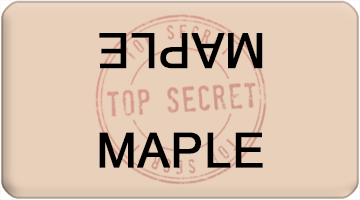
<style>
.page{position:relative;width:360px;height:200px;background:#e8d0bb}
.page>*{position:absolute;margin:0}
.t1{font:48px "ArialMT";color:#000000;font-weight:bold}
</style>
<div class="page">
<p class="t1" style="left:99px;top:33px;width:164px;height:36px;rotate:180deg">MAPLE</p>
<p class="t1" style="left:99px;top:132px;width:164px;height:36px">MAPLE</p>
</div>
